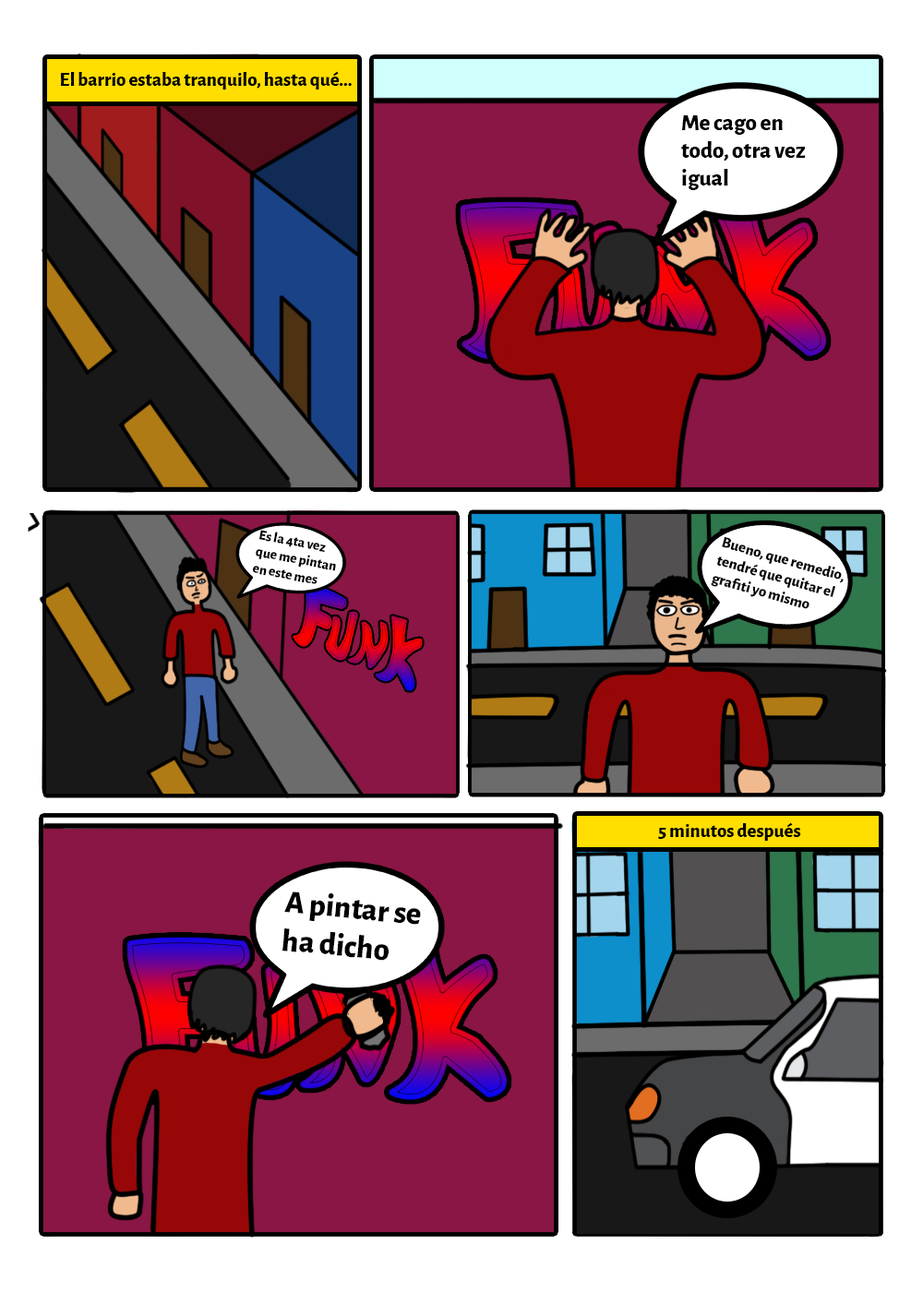
<style>
.page{position:relative;width:923px;height:1292px;background:#ffffff}
.page>*{position:absolute;margin:0}
.t1{font:19.2px "AlegreyaSans-ExtraBold";color:#000000}
.t2{font:23.1px "AlegreyaSans-ExtraBold";color:#000000}
.t3{font:14.1px "AlegreyaSans-ExtraBold";color:#000000}
.t4{font:15.4px "AlegreyaSans-ExtraBold";color:#000000}
.t5{font:31.8px "AlegreyaSans-ExtraBold";color:#000000}
</style>
<div class="page">
<p class="t1" style="left:61px;top:71px;width:291px;height:19px">El barrio estaba tranquilo, hasta qué...</p>
<p class="t2" style="left:681px;top:115px;width:125px;height:75px">Me cago en <br>todo, otra vez<br>igual</p>
<p class="t3" style="left:253px;top:530px;width:83px;height:54px;rotate:11deg">Es la 4ta vez<br>que me pintan <br>en este mes</p>
<p class="t4" style="left:711px;top:536px;width:133px;height:73px;rotate:16deg">Bueno, que remedio, <br>tendré que quitar el<br>grafiti yo mismo</p>
<p class="t1" style="left:658px;top:822px;width:143px;height:19px">5 minutos después</p>
<p class="t5" style="left:282px;top:892px;width:139px;height:69px;rotate:5deg">A pintar se <br>ha dicho</p>
</div>
